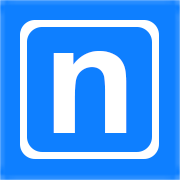
<style>
.page{position:relative;width:180px;height:180px;background:#0e7fff}
.page>*{position:absolute;margin:0}
.t1{font:153px "Arial-BoldMT";color:#ffffff}
</style>
<div class="page">
<p class="t1" style="left:53px;top:51px;width:74px;height:82px">n</p>
</div>
